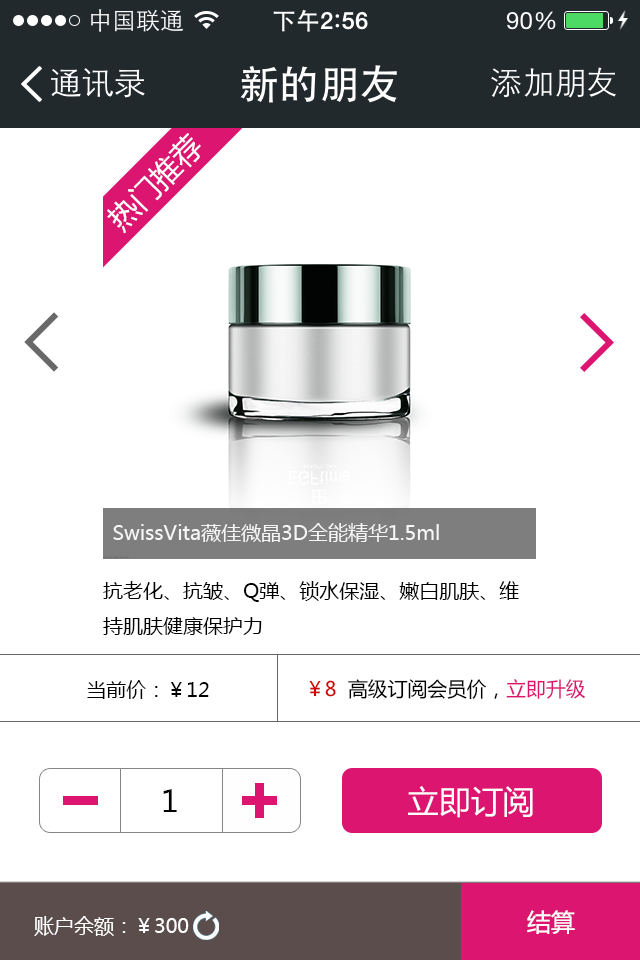
<style>
.page{position:relative;width:640px;height:960px;background:#ffffff}
.page>*{position:absolute;margin:0}
.t1{font:20px "MicrosoftYaHei";color:#f7f6f6}
.t2{font:20px "MicrosoftYaHei";color:#000000}
.t3{font:20px "MicrosoftYaHei";color:#ce0000}
.t4{font:20px "MicrosoftYaHei";color:#dc1570}
.t5{font:30px "MicrosoftYaHei";color:#000000}
.t6{font:32.4px "MicrosoftYaHei";color:#ffffff}
.t7{font:20px "MicrosoftYaHei";color:#ffffff}
.t8{font:20px "MicrosoftYaHei";color:#fffefe}
.t9{font:24px "MicrosoftYaHei";color:#ffffff}
</style>
<div class="page">
<p class="t1" style="left:113px;top:523px;width:326px;height:19px">SwissVita薇佳微晶3D全能精华1.5ml</p>
<p class="t2" style="left:103px;top:581px;width:416px;height:54px">抗老化、抗皱、Q弹、锁水保湿、嫩白肌肤、维<br>持肌肤健康保护力</p>
<p class="t2" style="left:87px;top:680px;width:122px;height:19px">当前价：￥12</p>
<p class="t2" style="left:309px;top:679px;width:277px;height:21px"><span class="t3">￥8  </span>高级订阅会员价，<span class="t4">立即升级</span></p>
<p class="t5" style="left:163px;top:789px;width:14px;height:23px">1</p>
<p class="t6" style="left:408px;top:786px;width:125px;height:32px">立即订阅</p>
<p class="t7" style="left:34px;top:916px;width:155px;height:20px">账户余额：<span class="t8">￥</span>300</p>
<p class="t9" style="left:527px;top:910px;width:48px;height:24px">结算</p>
</div>
